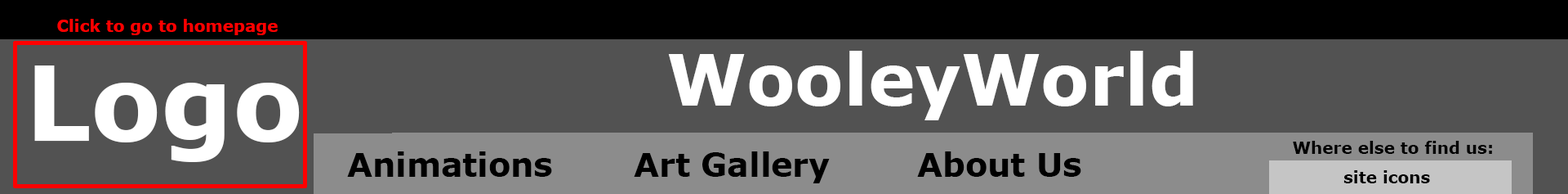
<style>
.page{position:relative;width:1568px;height:194px;background:#525252}
.page>*{position:absolute;margin:0}
.t1{font:16.3px "Verdana-Bold";color:#ff0000}
.t2{font:70.8px "Verdana-Bold";color:#ffffff}
.t3{font:102.6px "Verdana-Bold";color:#ffffff}
.t4{font:16.3px "Verdana-Bold";color:#000000}
.t5{font:32.4px "Verdana-Bold";color:#000000}
</style>
<div class="page">
<p class="t1" style="left:57px;top:19px;width:221px;height:16px">Click to go to homepage</p>
<p class="t2" style="left:668px;top:51px;width:525px;height:69px">WooleyWorld</p>
<p class="t3" style="left:34px;top:65px;width:266px;height:97px">Logo</p>
<p class="t4" style="left:1293px;top:140px;width:199px;height:14px">Where else to find us:</p>
<p class="t5" style="left:347px;top:151px;width:205px;height:25px">Animations</p>
<p class="t5" style="left:634px;top:151px;width:196px;height:32px">Art Gallery</p>
<p class="t5" style="left:917px;top:151px;width:164px;height:25px">About Us</p>
<p class="t4" style="left:1343px;top:170px;width:87px;height:13px">site icons</p>
</div>
